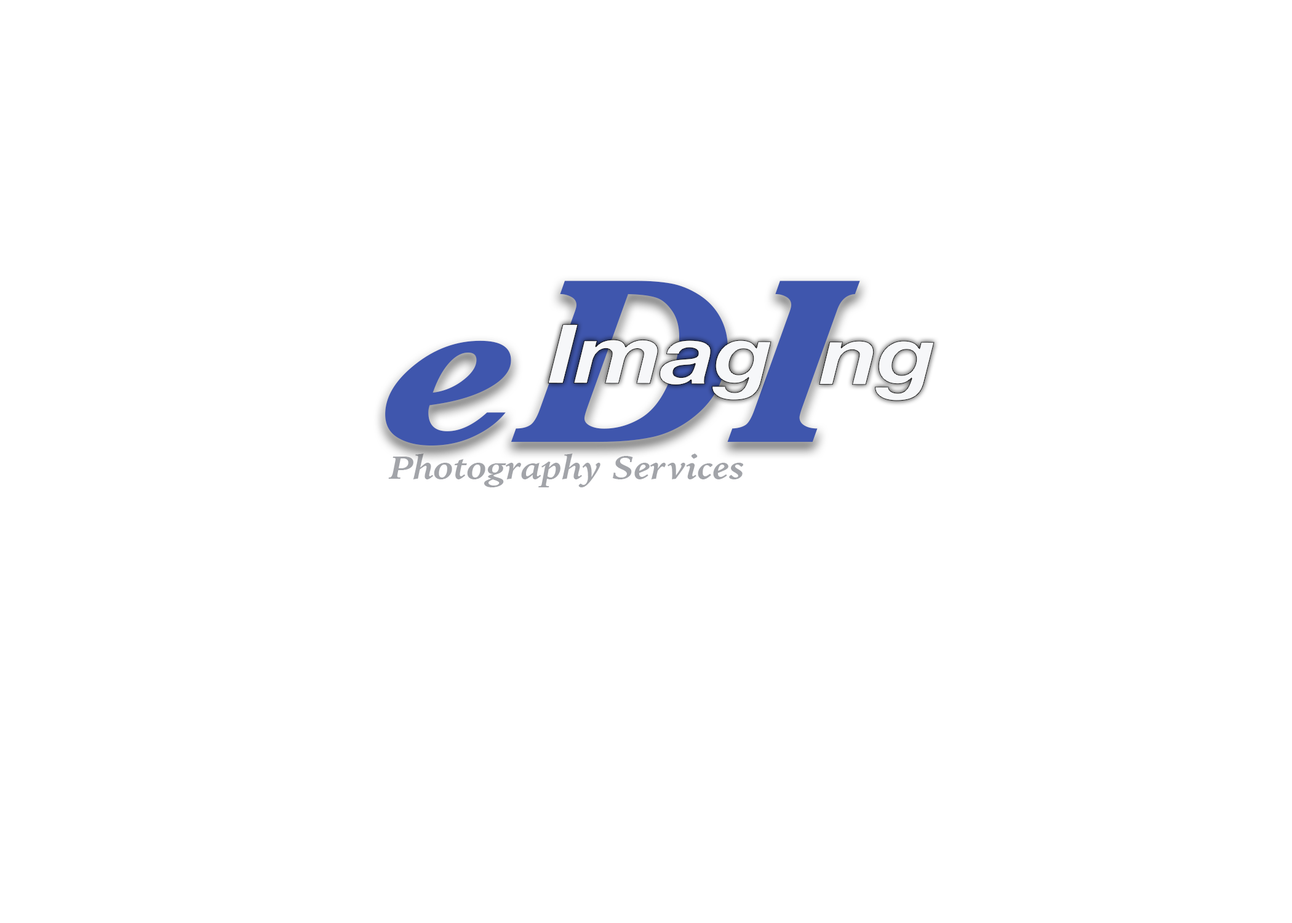
<style>
.page{position:relative;width:1292px;height:923px;background:#ffffff}
.page>*{position:absolute;margin:0}
.t1{font:417.2px "Baskerville-BoldItalic";letter-spacing:-0.01em;color:#3f56ad;scale:1.17 1}
.t2{font:142.2px "HelveticaNeue-BoldItalic";letter-spacing:-0.025em;color:#f6f7f9;scale:1.17 1}
.t3{font:57.2px "IowanOldStyle-BoldItalic";letter-spacing:-0.01em;color:#a2a4a9;scale:1.17 1}
</style>
<div class="page">
<p class="t1" style="left:385px;top:281px;width:475px;height:164px">eDI</p>
<p class="t2" style="left:548px;top:324px;width:387px;height:77px">Imag  ng</p>
<p class="t3" style="left:388px;top:453px;width:355px;height:34px">Photography Services</p>
</div>
